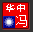
<style>
.page{position:relative;width:33px;height:32px;background:#f20000}
.page>*{position:absolute;margin:0}
.t1{font:10.4px "SimSun";color:#ffffff}
.t2{font:11.7px "SimSun";color:#ffffff}
</style>
<div class="page">
<p class="t1" style="left:6px;top:4px;width:19px;height:8px">华中</p>
<p class="t2" style="left:16px;top:15px;width:11px;height:12px">冯</p>
</div>
